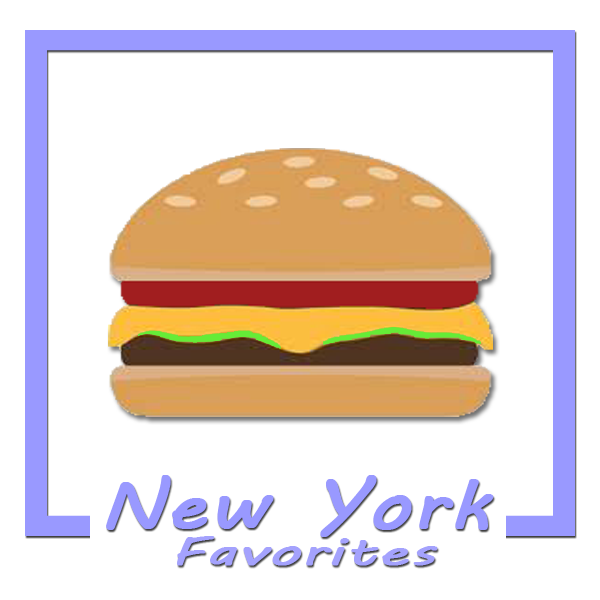
<style>
.page{position:relative;width:600px;height:600px;background:#ffffff}
.page>*{position:absolute;margin:0}
.t1{font:69.2px "MVBoli";color:#9999ff;font-weight:bold;scale:1.16 1}
.t2{font:39.8px "MVBoli";color:#a4a2fd;font-weight:bold;scale:1.51 1}
</style>
<div class="page">
<p class="t1" style="left:106px;top:475px;width:388px;height:62px">New York</p>
<p class="t2" style="left:177px;top:536px;width:261px;height:30px">Favorites</p>
</div>
